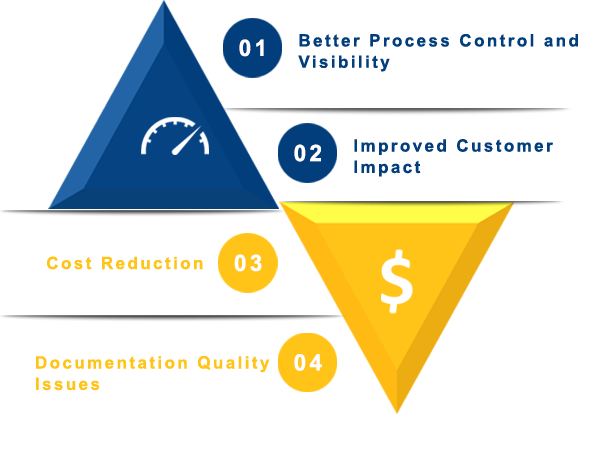
<style>
.page{position:relative;width:600px;height:450px;background:#ffffff}
.page>*{position:absolute;margin:0}
.t1{font:22.7px "Arial-BoldMT";letter-spacing:0.14em;color:#ffffff}
.t2{font:17.1px/21.3px "Arial-BoldMT";letter-spacing:0.14em;color:#023e7c}
.t3{font:17.1px "Arial-BoldMT";letter-spacing:0.14em;color:#ffc417}
.t4{font:17.1px/21.3px "Arial-BoldMT";letter-spacing:0.14em;color:#ffc417}
</style>
<div class="page">
<p class="t1" style="left:239px;top:39px;width:25px;height:18px">01</p>
<p class="t2" style="left:298px;top:34px;width:280px;height:38px">Better Process Control and <br>Visibility</p>
<p class="t1" style="left:294px;top:144px;width:27px;height:18px">02</p>
<p class="t2" style="left:354px;top:139px;width:199px;height:38px">Improved Customer <br>Impact</p>
<p class="t3" style="left:47px;top:256px;width:156px;height:14px">Cost Reduction</p>
<p class="t1" style="left:234px;top:254px;width:28px;height:18px">03</p>
<p class="t4" style="left:36px;top:356px;width:234px;height:35px">Documentation Quality <br>Issues</p>
<p class="t1" style="left:294px;top:354px;width:28px;height:17px">04</p>
</div>
